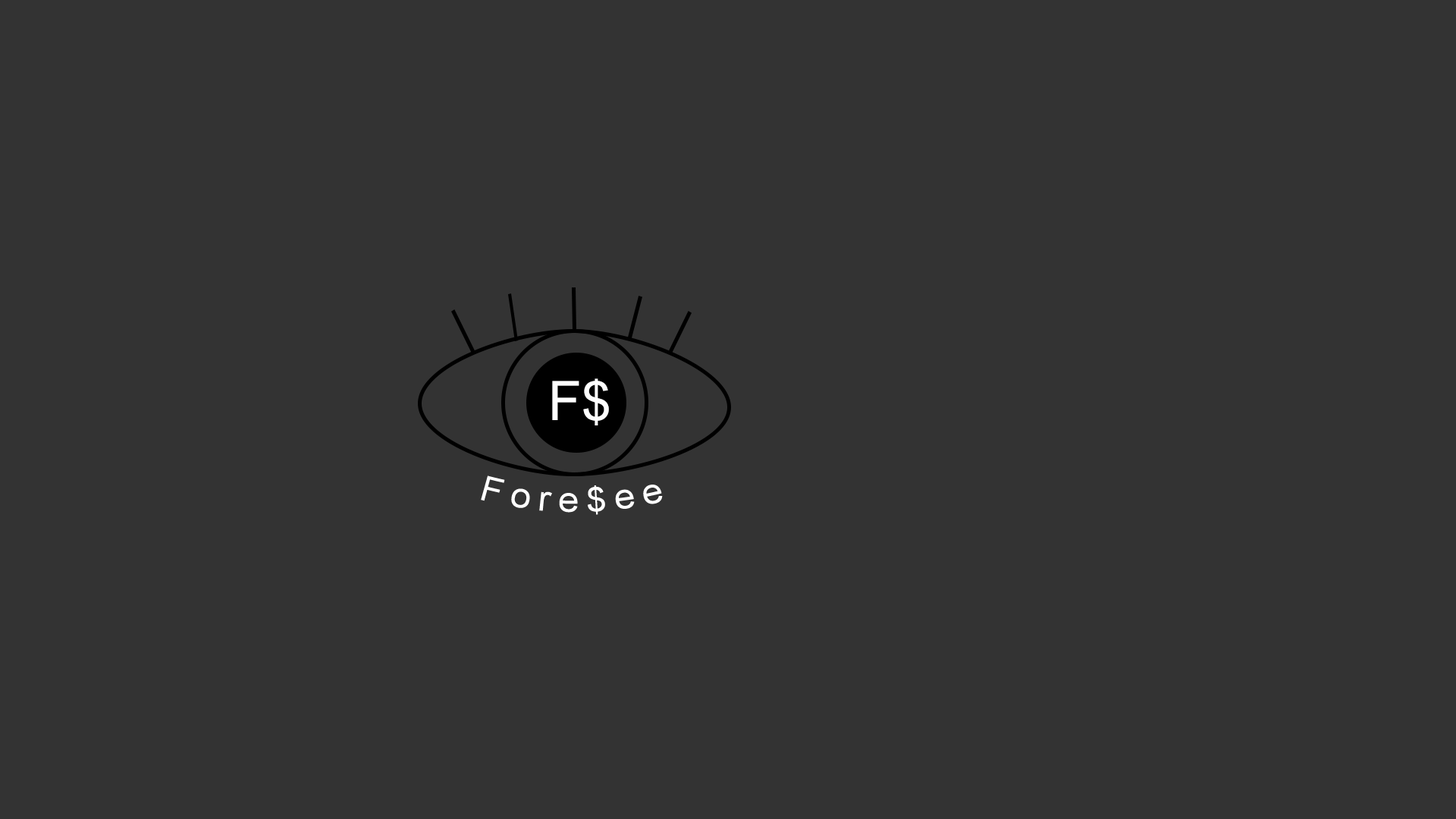
<style>
.page{position:relative;width:1456px;height:819px;background:#333333}
.page>*{position:absolute;margin:0}
.t1{font:54.6px "ArialMT";color:#fefefe}
.t2{font:53.1px "ArialMT";color:#fefefe}
.t3{font:33.9px "ArialMT";letter-spacing:0.2em;color:#ffffff}
</style>
<div class="page">
<p class="t1" style="left:552px;top:378px;width:57px;height:47px">F<span class="t2">$</span></p>
<p class="t3" style="left:481px;top:475px;width:182px;height:40px">Fore$ee</p>
</div>
